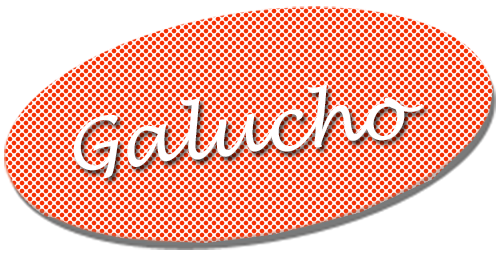
<style>
.page{position:relative;width:500px;height:256px;background:#ffffff}
.page>*{position:absolute;margin:0}
.t1{font:72px "LucidaHandwriting-Italic";letter-spacing:0.01em;color:#ffffff}
</style>
<div class="page">
<p class="t1" style="left:73px;top:84px;width:351px;height:95px;rotate:-6deg">Galucho</p>
</div>
